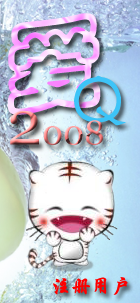
<style>
.page{position:relative;width:140px;height:303px}
.page>*{position:absolute;margin:0}
.t1{font:96.7px "STCaiyun";font-weight:bold}
.t2{font:80.8px "FZSTK--GBK1-0";color:#3dc4f8}
.t3{font:34.1px "Georgia"}
.t4{font:62.4px "Georgia"}
.t5{font:20px "STXingkai";color:#ff0000;font-weight:bold}
</style>
<div class="page">
<p class="t1" style="left:7px;top:13px;width:94px;height:102px;rotate:-6deg">爱</p>
<p class="t2" style="left:74px;top:75px;width:52px;height:51px">Q</p>
<p class="t3" style="left:10px;top:110px;width:93px;height:35px"><span class="t4">2</span>008</p>
<p class="t5" style="left:53px;top:277px;width:75px;height:18px">注册用户</p>
</div>
